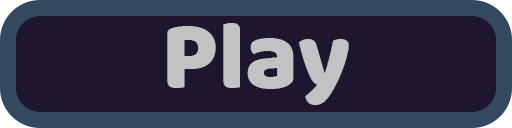
<style>
.page{position:relative;width:512px;height:128px;background:#1e162e}
.page>*{position:absolute;margin:0}
.t1{font:98px "Baloo-Regular";color:#c2c2c2}
</style>
<div class="page">
<p class="t1" style="left:167px;top:23px;width:182px;height:82px">Play</p>
</div>
